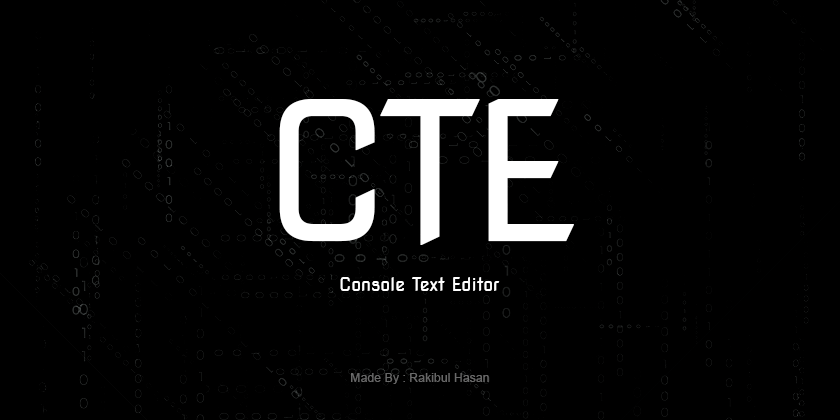
<style>
.page{position:relative;width:840px;height:420px;background:#000000}
.page>*{position:absolute;margin:0}
.t1{font:192px "NovaSquare";color:#ffffff}
.t2{font:17.8px "NovaSquare";color:#ffffff}
.t3{font:12.3px "ArialMT";color:#676767}
</style>
<div class="page">
<p class="t1" style="left:279px;top:99px;width:295px;height:146px">CTE</p>
<p class="t2" style="left:340px;top:277px;width:160px;height:14px">Console Text Editor</p>
<p class="t3" style="left:351px;top:373px;width:138px;height:11px">Made By : Rakibul Hasan</p>
</div>
